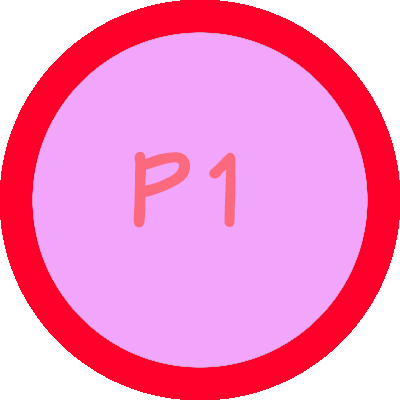
<style>
.page{position:relative;width:400px;height:400px;background:#f1a5fb}
.page>*{position:absolute;margin:0}
.t1{font:100px "DroidSansFallback";color:#fb697e}
</style>
<div class="page">
<p class="t1" style="left:133px;top:152px;width:103px;height:76px">P1</p>
</div>
